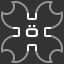
<style>
.page{position:relative;width:64px;height:64px;background:#333333}
.page>*{position:absolute;margin:0}
.t1{font:16px "Conthrax-SemiBold";color:#ffffff}
</style>
<div class="page">
<p class="t1" style="left:25px;top:24px;width:14px;height:13px">ö</p>
</div>
